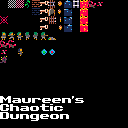
<style>
.page{position:relative;width:128px;height:128px;background:#000000}
.page>*{position:absolute;margin:0}
.t1{font:9px "ChevyRay---Lazytown";color:#ffffff}
</style>
<div class="page">
<p class="t1" style="left:0px;top:96px;width:84px;height:7px">Maureen's</p>
<p class="t1" style="left:0px;top:112px;width:69px;height:9px">Dungeon</p>
<p class="t1" style="left:0px;top:104px;width:63px;height:7px">Chaotic</p>
</div>
